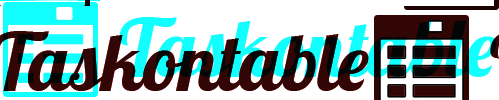
<style>
.page{position:relative;width:499px;height:100px;background:#ffffff}
.page>*{position:absolute;margin:0}
.t1{font:80px "Lobster-Regular"}
</style>
<div class="page">
<p class="t1" style="left:119px;top:17px;width:378px;height:60px">Taskontable</p>
</div>
